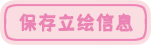
<style>
.page{position:relative;width:151px;height:45px;background:#f9dde0}
.page>*{position:absolute;margin:0}
.t1{font:12px "shetumodengxiaofangti";color:#eb84b4;font-weight:bold;scale:0.94 1}
</style>
<div class="page">
<p class="t1" style="left:19px;top:13px;width:114px;height:19px">保存立绘信息</p>
</div>
